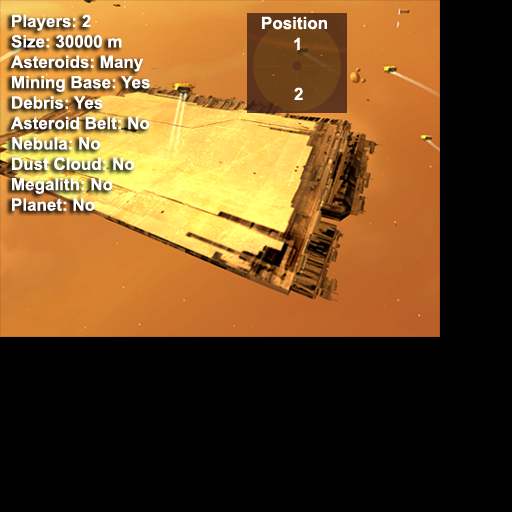
<style>
.page{position:relative;width:512px;height:512px;background:#000000}
.page>*{position:absolute;margin:0}
.t1{font:17px "Arial-BoldMT";color:#ffffff}
.t2{font:17px "Arial-BoldMT";color:#fefffe}
</style>
<div class="page">
<p class="t1" style="left:11px;top:14px;width:139px;height:197px">Players: 2<br>Size: 30000 m<br>Asteroids: Many<br>Mining Base: Yes<br>Debris: Yes<br>Asteroid Belt: No<br>Nebula: No<br>Dust Cloud: No<br>Megalith: No<br>Planet: No</p>
<p class="t2" style="left:262px;top:16px;width:65px;height:14px">Position</p>
<p class="t1" style="left:294px;top:37px;width:6px;height:13px">1</p>
<p class="t1" style="left:294px;top:87px;width:9px;height:13px">2</p>
</div>
